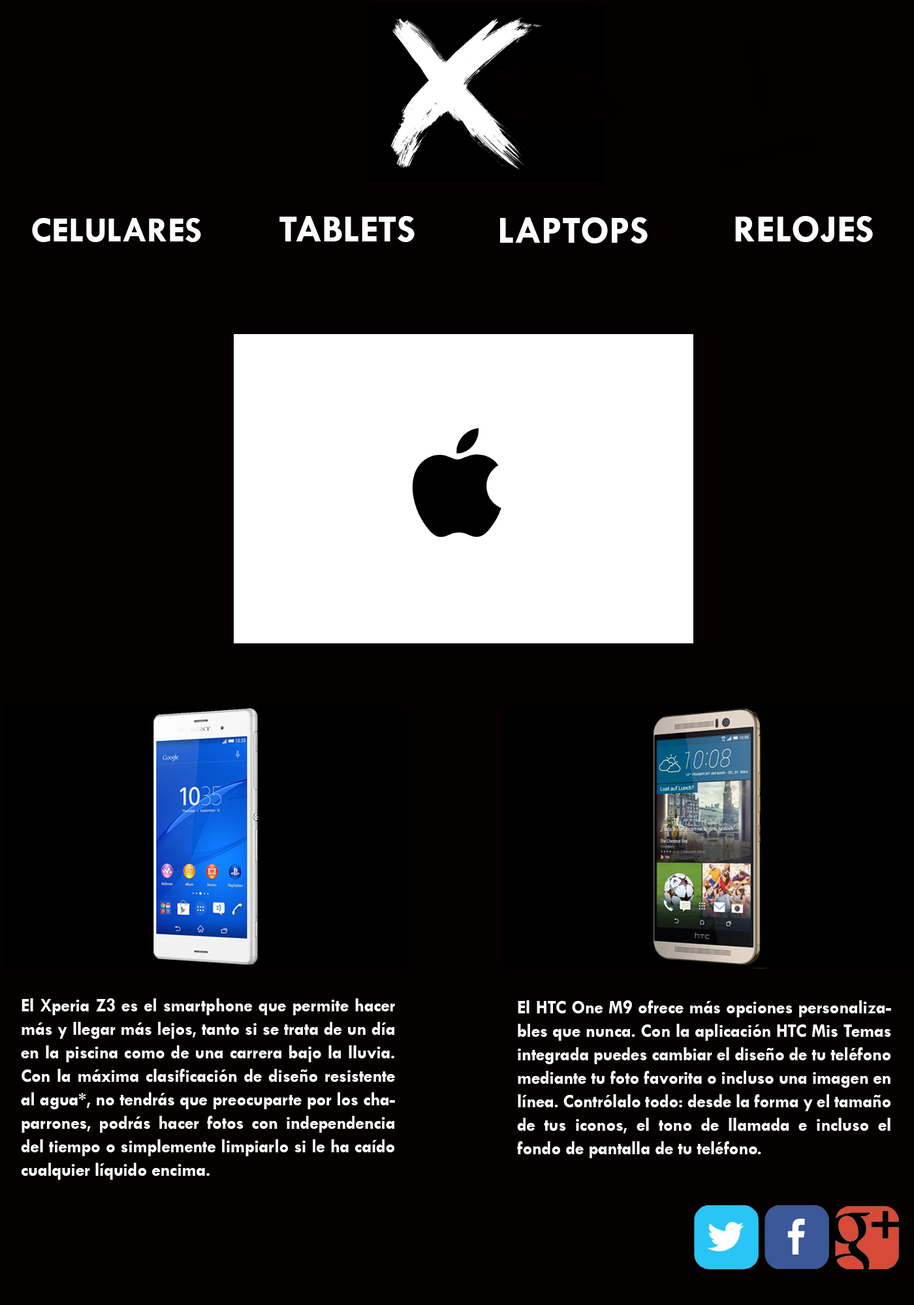
<style>
.page{position:relative;width:914px;height:1305px;background:#040100}
.page>*{position:absolute;margin:0}
.t1{font:35.9px "TwCenMT-Bold";color:#fefefe}
.t2{font:19.6px "TwCenMT-Bold";color:#fefefe}
.t3{font:39.2px "TwCenMT-Bold";color:#fefefe}
.t4{font:19.6px "TwCenMT-Bold";color:#fefefe;scale:0.92 1}
</style>
<div class="page">
<p class="t1" style="left:32px;top:218px;width:169px;height:24px"><span class="t2"><br></span>CELULARES</p>
<p class="t3" style="left:279px;top:216px;width:135px;height:26px">TABLETS</p>
<p class="t3" style="left:500px;top:217px;width:147px;height:26px">LAPTOPS</p>
<p class="t3" style="left:735px;top:216px;width:138px;height:26px">RELOJES</p>
<p class="t4" style="left:21px;top:998px;width:374px;height:182px;text-align:justify">El Xperia Z3 es el smartphone que permite hacer más y llegar más lejos, tanto si se trata de un día en la piscina como de una carrera bajo la lluvia. Con la máxima clasificación de diseño resistente al agua*, no tendrás que preocuparte por los chaparrones, podrás hacer fotos con independencia del tiempo o simplemente limpiarlo si le ha caído cualquier líquido encima.</p>
<p class="t4" style="left:517px;top:1000px;width:374px;height:158px;text-align:justify">El HTC One M9 ofrece más opciones personalizables que nunca. Con la aplicación HTC Mis Temas integrada puedes cambiar el diseño de tu teléfono mediante tu foto favorita o incluso una imagen en línea. Contrólalo todo: desde la forma y el tamaño de tus iconos, el tono de llamada e incluso el fondo de pantalla de tu teléfono.</p>
</div>
